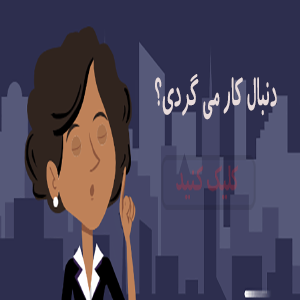
<style>
.page{position:relative;width:300px;height:300px;background:#2d2e4e}
.page>*{position:absolute;margin:0}
.t1{font:46.4px "2--KoodakBold";color:#e8dbdb;scale:0.39 1}
</style>
<div class="page">
<p class="t1" style="left:155px;top:74px;width:122px;height:46px">دنبال کار می گردی؟</p>
<p class="t1" style="left:155px;top:74px;width:122px;height:46px">دنبال کار می گردی؟</p>
</div>
